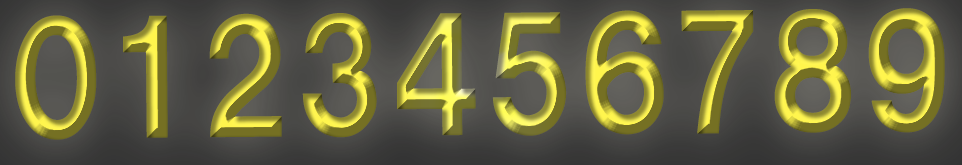
<style>
.page{position:relative;width:962px;height:165px}
.page>*{position:absolute;margin:0}
.t1{font:150px "HGSSoeiKakugothicUB";letter-spacing:-0.025em;font-weight:bold}
</style>
<div class="page">
<p class="t1" style="left:15px;top:8px;width:930px;height:132px">0123456789</p>
</div>
